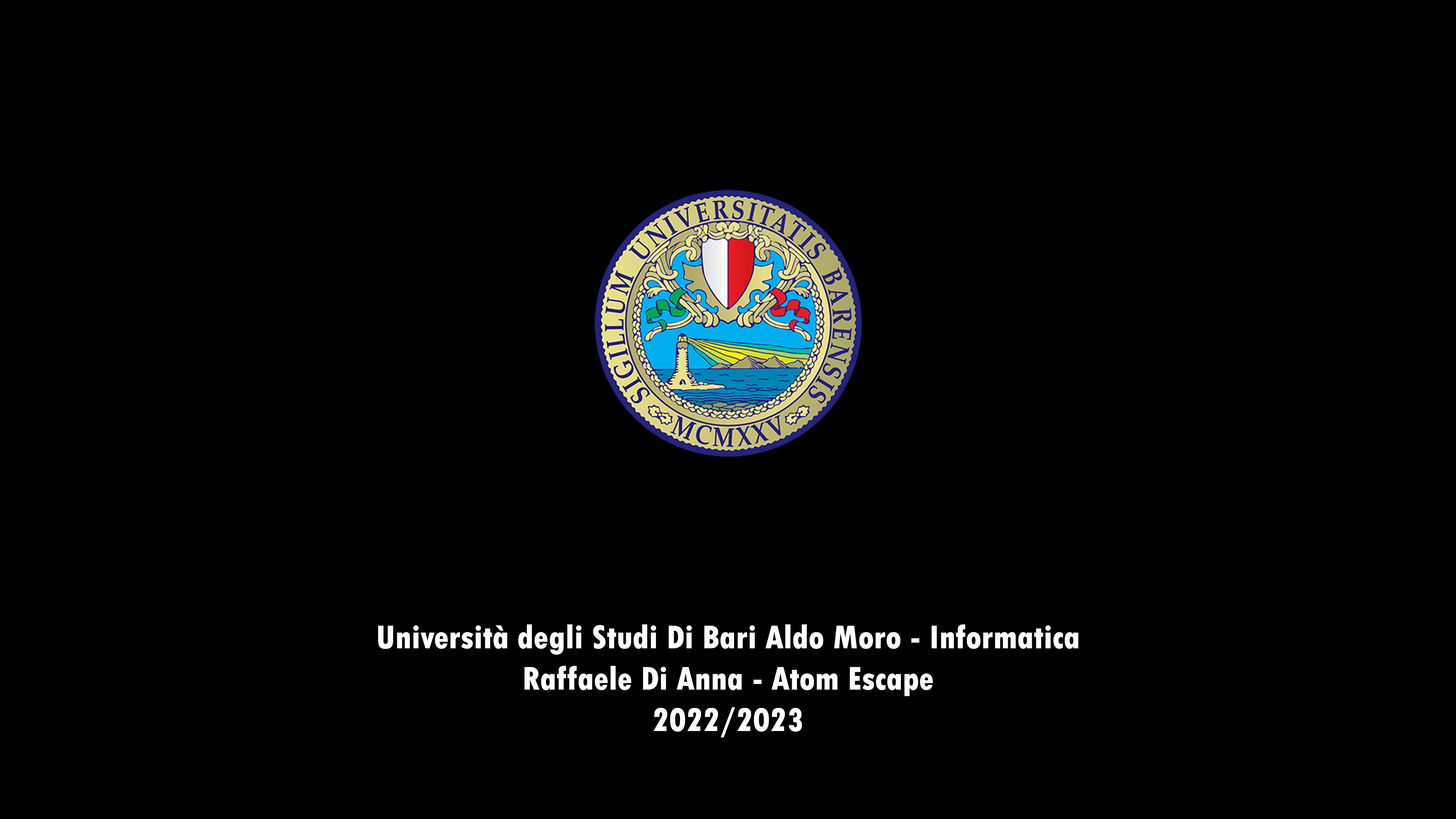
<style>
.page{position:relative;width:1456px;height:819px;background:#000000}
.page>*{position:absolute;margin:0}
.t1{font:34.5px "TwCenMT-CondensedExtraBold";color:#ffffff}
</style>
<div class="page">
<p class="t1" style="left:378px;top:624px;width:700px;height:113px;text-align:center">Università degli Studi Di Bari Aldo Moro - Informatica<br>Raffaele Di Anna - Atom Escape<br>2022/2023</p>
</div>
